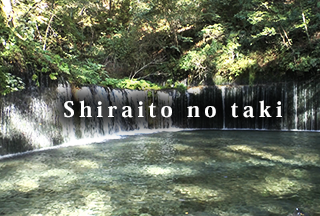
<style>
.page{position:relative;width:320px;height:216px}
.page>*{position:absolute;margin:0}
.t1{font:21px "KozMinPr6N-Heavy";letter-spacing:0.2em;color:#ffffff}
</style>
<div class="page">
<p class="t1" style="left:64px;top:100px;width:218px;height:18px">Shiraito no taki</p>
</div>
